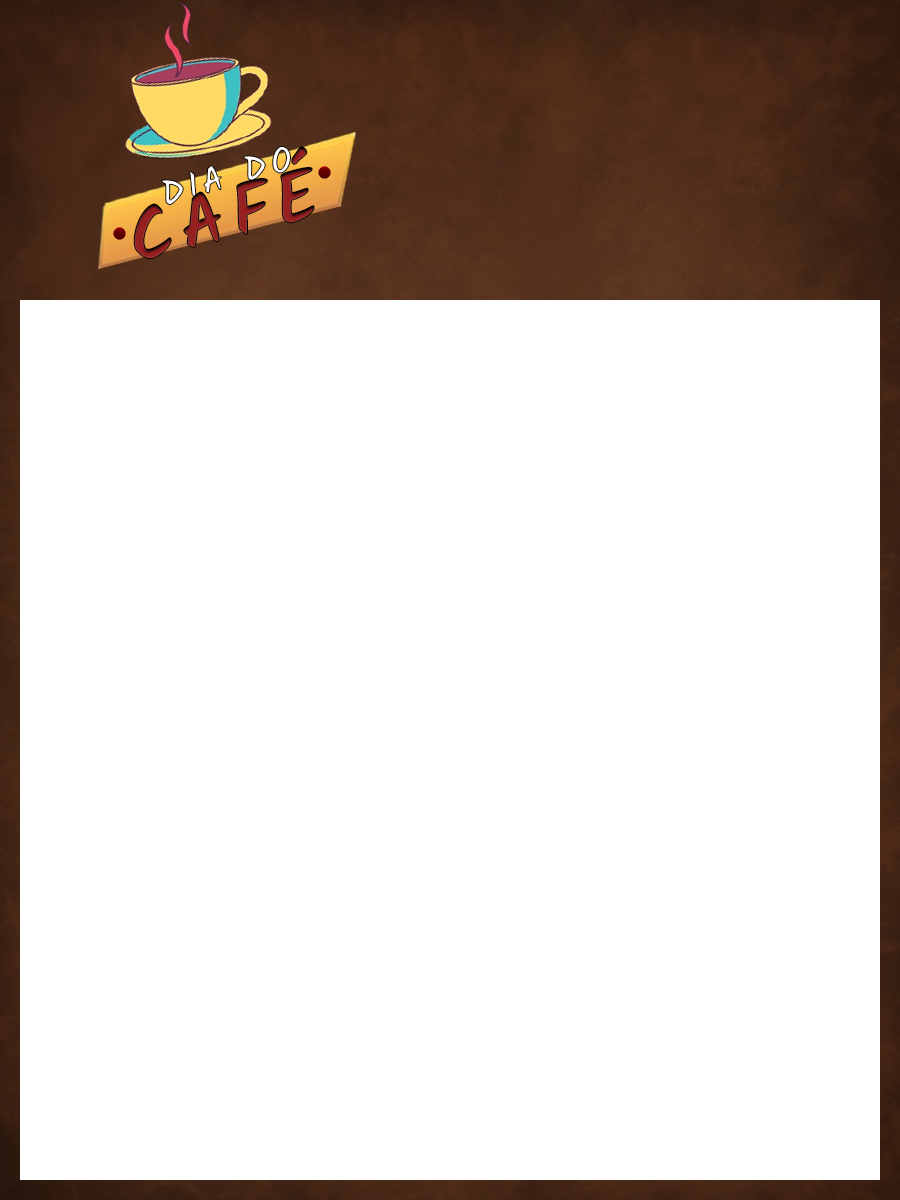
<style>
.page{position:relative;width:900px;height:1200px;background:#ffffff}
.page>*{position:absolute;margin:0}
.t1{font:72.8px "Kalam-Bold";letter-spacing:0.1em;color:#961f1f}
.t2{font:36px "Kalam-Bold";letter-spacing:0.1em}
</style>
<div class="page">
<p class="t1" style="left:133px;top:146px;width:182px;height:114px;rotate:-14deg">CAFÉ</p>
<p class="t2" style="left:161px;top:146px;width:130px;height:60px;rotate:-16deg">DIA DO</p>
</div>
